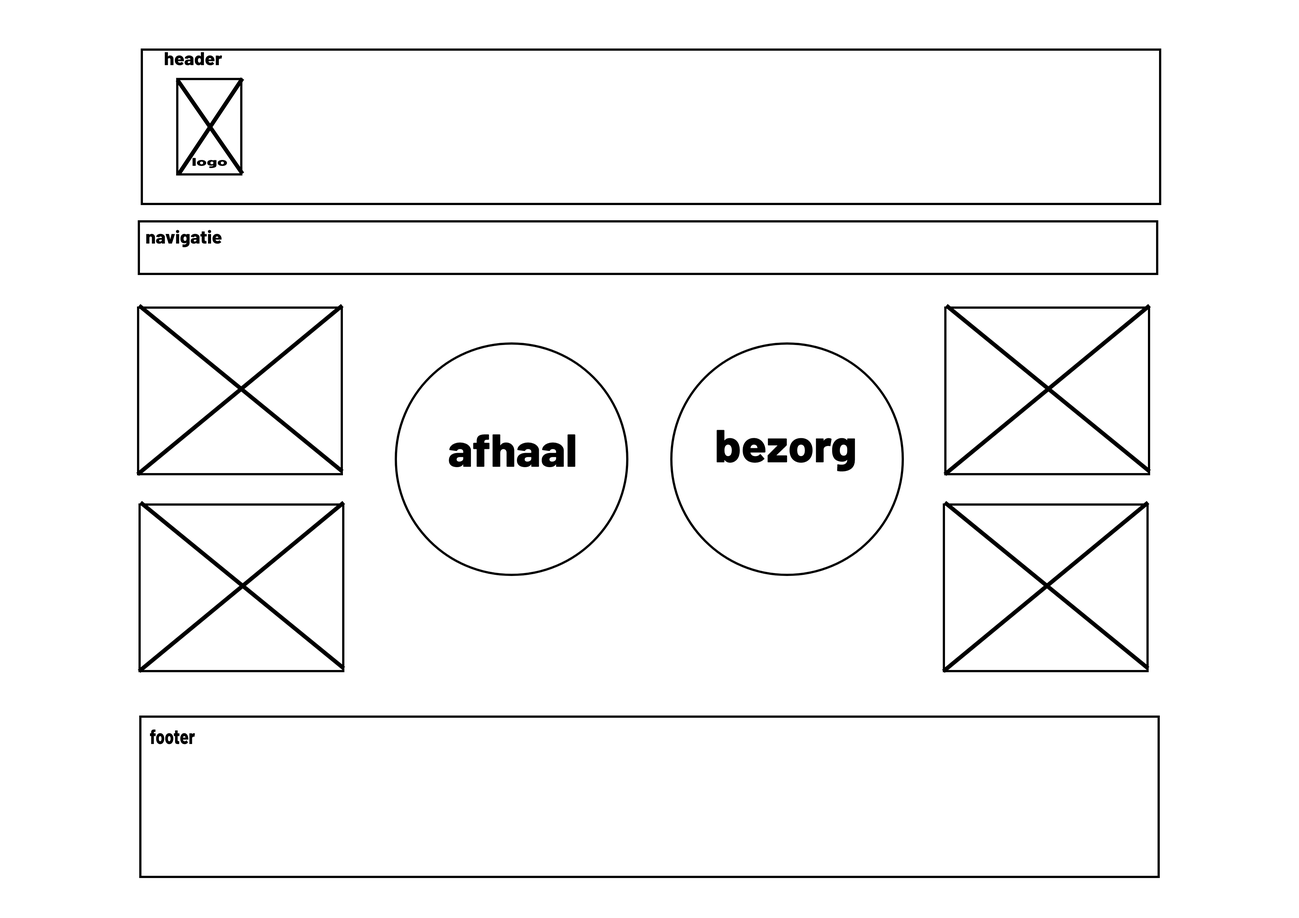
<style>
.page{position:relative;width:1299px;height:918px;background:#ffffff}
.page>*{position:absolute;margin:0}
.t1{font:18.5px "Barlow-ExtraBold";color:#000000}
.t2{font:11.2px "Barlow-ExtraBold";color:#000000;scale:1.66 1}
.t3{font:46.3px "Barlow-ExtraBold";color:#000000}
.t4{font:20.7px "Barlow-ExtraBold";color:#000000;scale:0.78 1}
</style>
<div class="page">
<p class="t1" style="left:165px;top:52px;width:57px;height:14px">header</p>
<p class="t2" style="left:193px;top:158px;width:34px;height:10px">logo</p>
<p class="t1" style="left:146px;top:230px;width:76px;height:17px">navigatie</p>
<p class="t3" style="left:449px;top:434px;width:126px;height:33px">afhaal</p>
<p class="t3" style="left:716px;top:430px;width:139px;height:42px">bezorg</p>
<p class="t4" style="left:150px;top:729px;width:45px;height:16px">footer</p>
</div>
